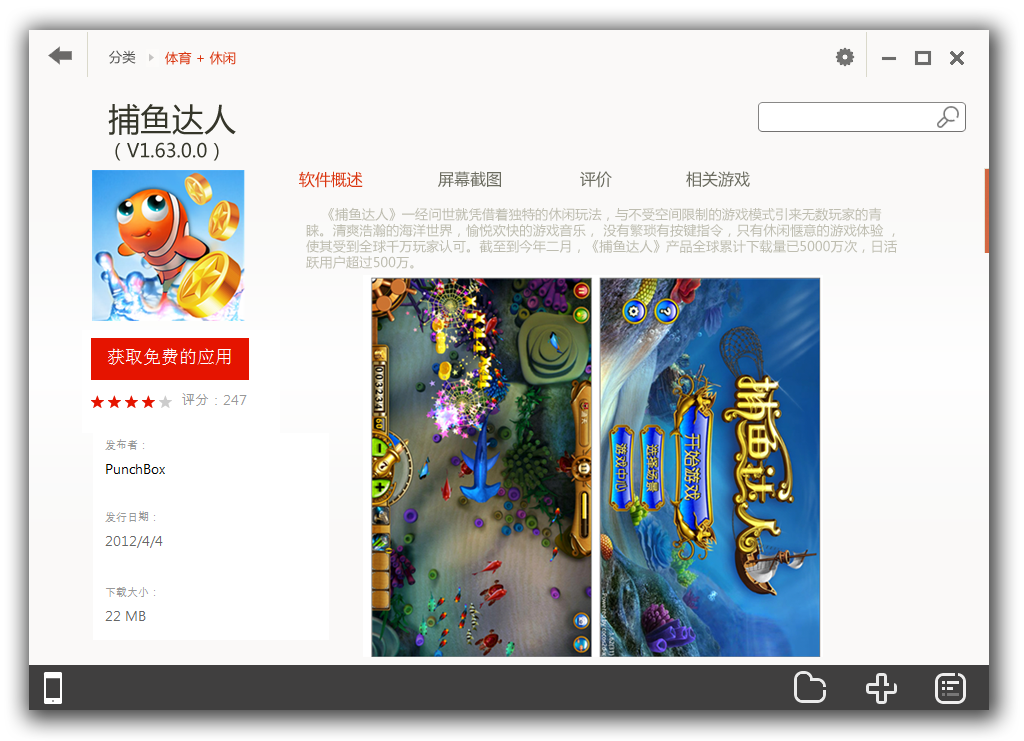
<style>
.page{position:relative;width:1024px;height:741px;background:#faf9f8}
.page>*{position:absolute;margin:0}
.t1{font:13.3px "MicrosoftYaHei";color:#535352}
.t2{font:13.3px "MicrosoftYaHei";color:#da3610}
.t3{font:18.7px/26.7px "MicrosoftYaHei";color:#35362a}
.t4{font:32px/26.7px "MicrosoftYaHei";color:#35362a}
.t5{font:16px "MicrosoftYaHei";color:#da3610}
.t6{font:16px "MicrosoftYaHei";color:#6b6c60}
.t7{font:13.3px "MicrosoftYaHei";color:#bebdb0}
</style>
<div class="page">
<p class="t1" style="left:109px;top:50px;width:27px;height:14px">分类</p>
<p class="t2" style="left:165px;top:51px;width:71px;height:14px">体育 + 休闲</p>
<p class="t3" style="left:108px;top:104px;width:128px;height:57px"><span class="t4">捕鱼达人<br></span>（V1.63.0.0）</p>
<p class="t5" style="left:299px;top:171px;width:64px;height:17px">软件概述</p>
<p class="t6" style="left:438px;top:171px;width:63px;height:16px">屏幕截图</p>
<p class="t6" style="left:580px;top:171px;width:32px;height:17px">评价</p>
<p class="t6" style="left:686px;top:171px;width:64px;height:16px">相关游戏</p>
<p class="t7" style="left:306px;top:207px;width:591px;height:62px">《捕鱼达人》一经问世就凭借着独特的休闲玩法，与不受空间限制的游戏模式引来无数玩家的青<br>睐。清爽浩瀚的海洋世界，愉悦欢快的游戏音乐， 没有繁琐有按键指令，只有休闲惬意的游戏体验 ，<br>使其受到全球千万玩家认可。截至到今年二月，《捕鱼达人》产品全球累计下载量已5000万次，日活<br>跃用户超过500万。</p>
</div>
